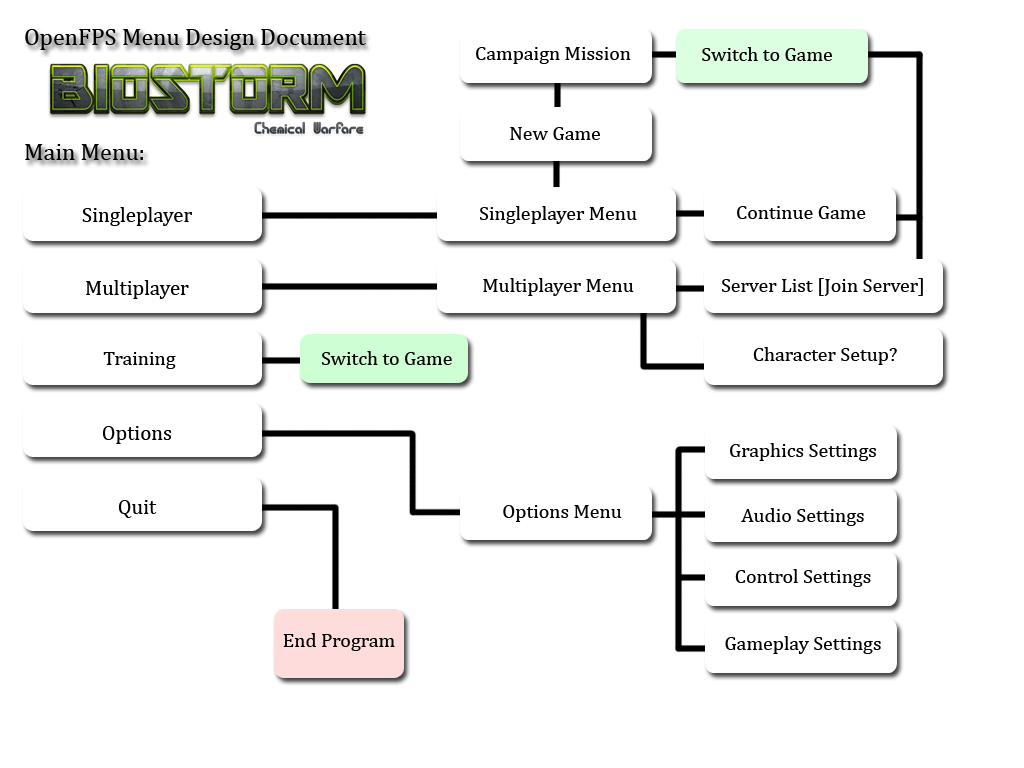
<style>
.page{position:relative;width:1024px;height:768px;background:#ffffff}
.page>*{position:absolute;margin:0}
.t1{font:24px "Cambria";color:#000000}
.t2{font:20px "Cambria";color:#000000}
.t3{font:21px "Cambria";color:#000000}
</style>
<div class="page">
<p class="t1" style="left:25px;top:29px;width:341px;height:131px">OpenFPS Menu Design Document<br><br><br><br>Main Menu:</p>
<p class="t2" style="left:476px;top:47px;width:155px;height:17px">Campaign Mission</p>
<p class="t2" style="left:702px;top:47px;width:130px;height:14px">Switch to Game</p>
<p class="t2" style="left:510px;top:127px;width:90px;height:13px">New Game</p>
<p class="t2" style="left:82px;top:207px;width:370px;height:311px;text-align:center"><span class="t3">Singleplayer<br><br><br>Multiplayer<br><br><br></span>                                                                                                                 Training                                 Switch to Game                                                 <br><span class="t3"><br><br>Options<br><br><br>Quit</span></p>
<p class="t2" style="left:480px;top:206px;width:157px;height:90px;text-align:center">Singleplayer Menu<br><br><br>Multiplayer Menu</p>
<p class="t2" style="left:737px;top:206px;width:129px;height:13px">Continue Game</p>
<p class="t2" style="left:722px;top:278px;width:201px;height:18px">Server List [Join Server]</p>
<p class="t2" style="left:753px;top:347px;width:144px;height:18px">Character Setup?</p>
<p class="t2" style="left:725px;top:443px;width:156px;height:211px;text-align:center">Graphics Settings<br><br><br>Audio Settings<br><br>Control Settings<br><br><br>Gameplay Settings</p>
<p class="t2" style="left:503px;top:505px;width:119px;height:17px">Options Menu</p>
<p class="t2" style="left:283px;top:633px;width:112px;height:18px">End Program</p>
</div>
